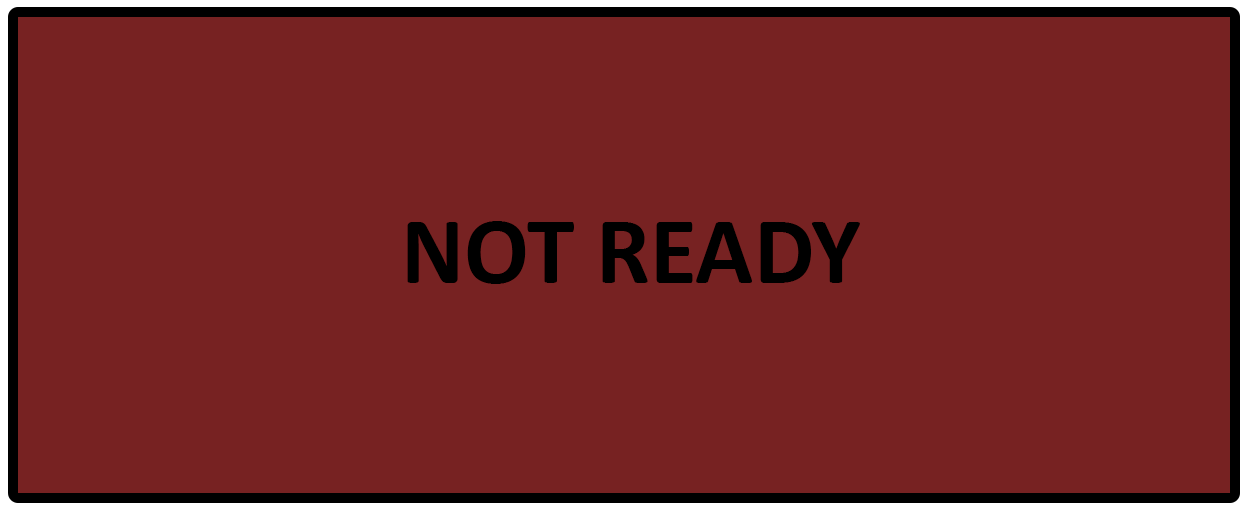
<style>
.page{position:relative;width:1245px;height:510px;background:#772222}
.page>*{position:absolute;margin:0}
.t1{font:95.8px "Calibri-Bold";color:#000000}
</style>
<div class="page">
<p class="t1" style="left:407px;top:221px;width:453px;height:63px">NOT READY</p>
</div>
